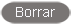
<style>
.page{position:relative;width:73px;height:25px;background:#797574}
.page>*{position:absolute;margin:0}
.t1{font:14px "ArialMT";color:#f7f7fa}
</style>
<div class="page">
<p class="t1" style="left:16px;top:7px;width:39px;height:10px">Borrar</p>
</div>
